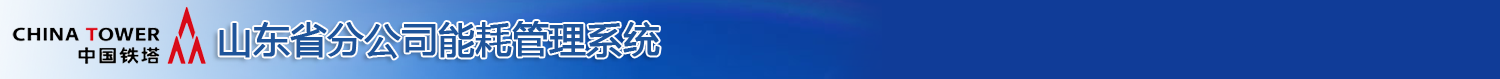
<style>
.page{position:relative;width:1500px;height:79px;background:#103c98}
.page>*{position:absolute;margin:0}
.t1{font:36px "MicrosoftYaHei";color:#1e549a;font-weight:bold}
</style>
<div class="page">
<p class="t1" style="left:219px;top:21px;width:441px;height:38px">山东省分公司能耗管理系统</p>
</div>
